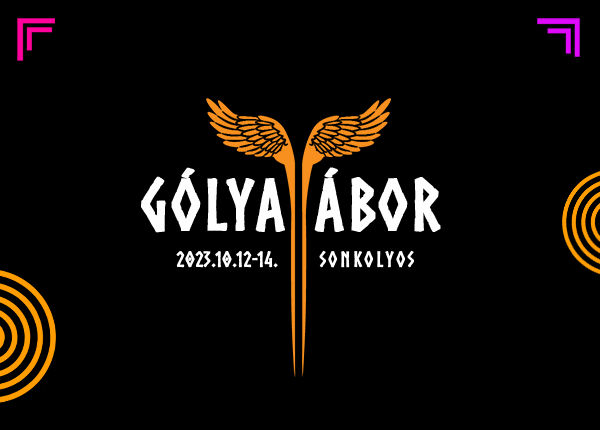
<style>
.page{position:relative;width:600px;height:430px;background:#000000}
.page>*{position:absolute;margin:0}
.t1{font:70.7px "Norse-Bold";letter-spacing:0.02em;color:#fefefe;font-weight:bold}
.t2{font:21px "Norse-Bold";color:#ffffff;font-weight:bold}
.t3{font:21px "Norse-Bold";letter-spacing:0.12em;color:#ffffff;font-weight:bold}
</style>
<div class="page">
<p class="t1" style="left:141px;top:167px;width:144px;height:66px">GÓLYA</p>
<p class="t1" style="left:314px;top:167px;width:127px;height:65px">ÁBOR</p>
<p class="t2" style="left:176px;top:251px;width:102px;height:17px">2023.10.12-14.</p>
<p class="t3" style="left:319px;top:250px;width:95px;height:18px">Sonkolyos</p>
</div>
